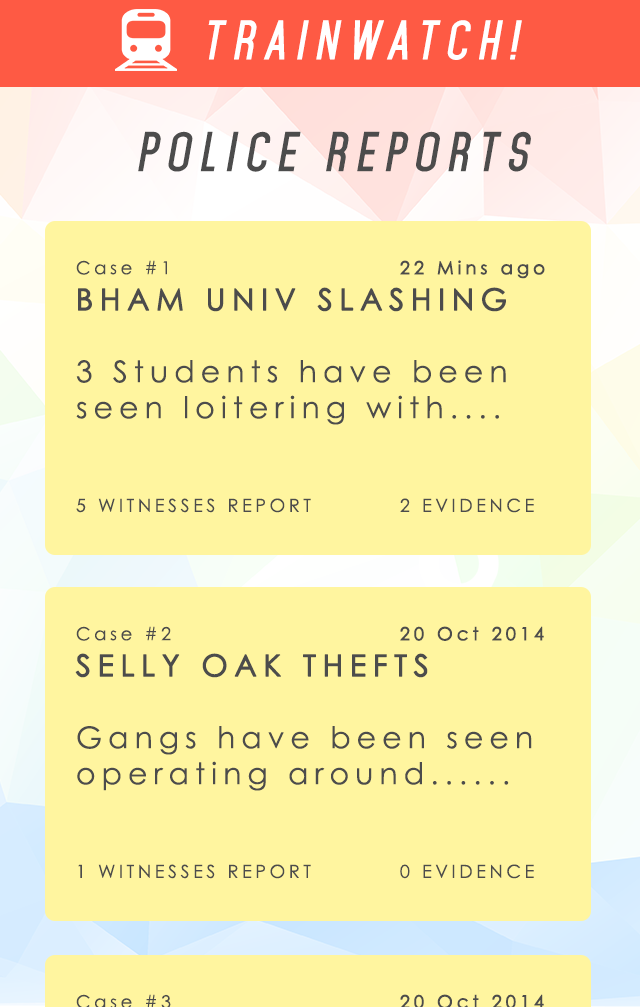
<style>
.page{position:relative;width:640px;height:1007px;background:#fff59f}
.page>*{position:absolute;margin:0}
.t1{font:48px "Mohave-BoldItalic";letter-spacing:0.2em;color:#ffffff;text-transform:uppercase}
.t2{font:48px "Mohave-BoldItalic";letter-spacing:0.2em;color:#4c4c4c;text-transform:uppercase}
.t3{font:30px "CenturyGothic";letter-spacing:0.2em;color:#4c4c4c}
.t4{font:18px "CenturyGothic";letter-spacing:0.2em;color:#4c4c4c}
.t5{font:18px "CenturyGothic";letter-spacing:0.2em;color:#4c4c4c;font-weight:bold}
.t6{font:30px "CenturyGothic";letter-spacing:0.2em;color:#4c4c4c;font-weight:bold}
</style>
<div class="page">
<p class="t1" style="left:208px;top:20px;width:314px;height:40px">Trainwatch!</p>
<p class="t2" style="left:138px;top:131px;width:393px;height:41px">Police Reports</p>
<p class="t3" style="left:76px;top:260px;width:469px;height:253px"><span class="t4">Case #1       </span><span class="t5">22 Mins ago<br></span><span class="t6">BHAM UNIV SLASHING<br></span><br>3 Students have been<br>seen loitering with....<br><br><br><span class="t4">5 WITNESSES REPORT   2 EVIDENCE</span></p>
<p class="t3" style="left:75px;top:626px;width:469px;height:253px"><span class="t4">Case #2       </span><span class="t5">20 Oct 2014<br></span><span class="t6">SELLY OAK THEFTS<br></span><br>Gangs have been seen<br>operating around......<br><br><br><span class="t4">1 WITNESSES REPORT   0 EVIDENCE</span></p>
</div>
